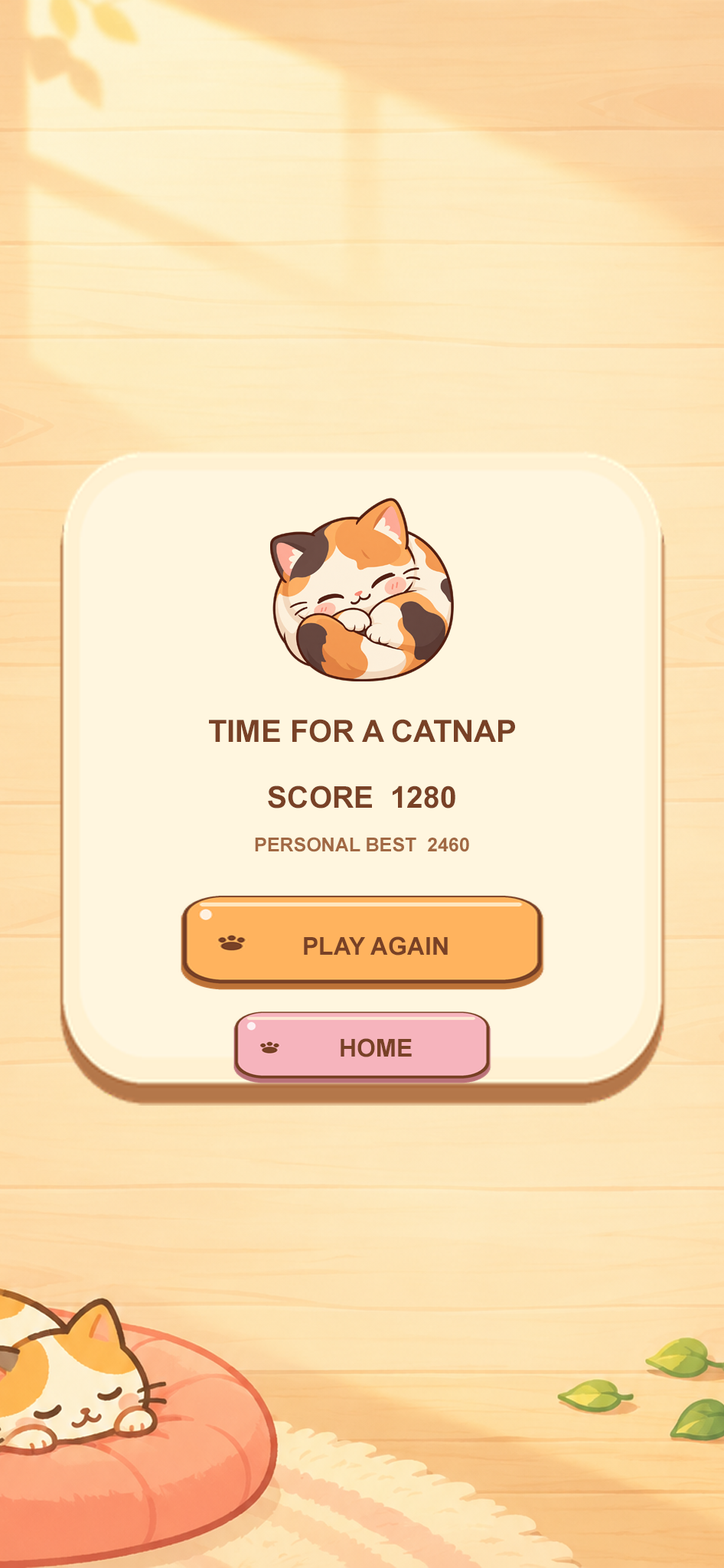
<style>
.page{position:relative;width:724px;height:1568px;background:#fff6df}
.page>*{position:absolute;margin:0}
.t1{font:30.6px "Arial-BoldMT";color:#784126}
.t2{font:29.9px "Arial-BoldMT";color:#784126}
.t3{font:19.1px "Arial-BoldMT";color:#a16843}
.t4{font:24.5px "Arial-BoldMT";color:#784126}
</style>
<div class="page">
<p class="t1" style="left:209px;top:719px;width:306px;height:24px">TIME FOR A CATNAP</p>
<p class="t2" style="left:268px;top:786px;width:188px;height:22px">SCORE  1280</p>
<p class="t3" style="left:255px;top:837px;width:214px;height:15px">PERSONAL BEST  2460</p>
<p class="t4" style="left:304px;top:936px;width:144px;height:20px">PLAY AGAIN</p>
<p class="t4" style="left:341px;top:1038px;width:71px;height:19px">HOME</p>
</div>
